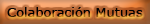
<style>
.page{position:relative;width:150px;height:24px}
.page>*{position:absolute;margin:0}
.t1{font:13px "Verdana"}
</style>
<div class="page">
<p class="t1" style="left:7px;top:7px;width:136px;height:10px">Colaboración Mutuas</p>
</div>
